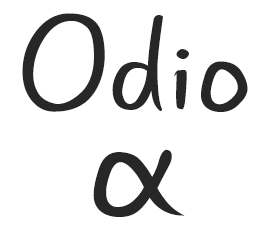
<style>
.page{position:relative;width:273px;height:238px;background:#ffffff}
.page>*{position:absolute;margin:0}
.t1{font:140px/105px "GunnyRewritten";color:#272727;scale:1.1 1}
.t2{font:180px/105px "GunnyRewritten";color:#272727;scale:1.1 1}
.t3{font:140px/130px "GunnyRewritten";color:#272727;scale:1.1 1}
</style>
<div class="page">
<p class="t1" style="left:22px;top:13px;width:226px;height:204px;text-align:center">Odio<br><span class="t2">α<br></span><span class="t3"></span></p>
</div>
